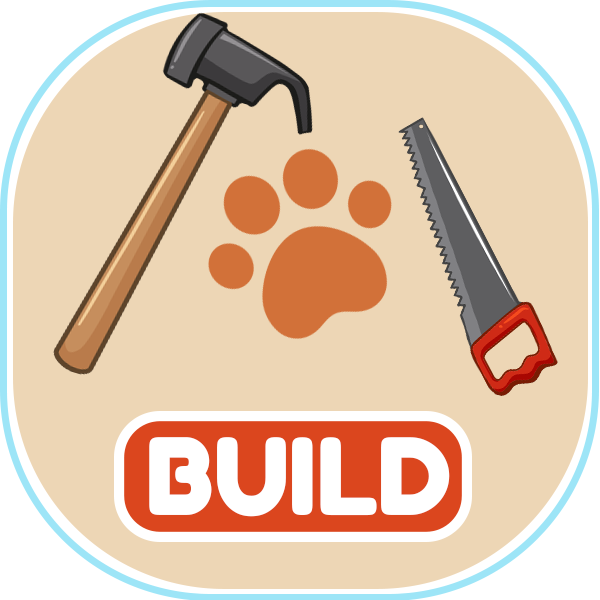
<style>
.page{position:relative;width:600px;height:600px;background:#edd6b5}
.page>*{position:absolute;margin:0}
.t1{font:111px "Fredoka-Bold";color:#ffffff}
</style>
<div class="page">
<p class="t1" style="left:149px;top:437px;width:301px;height:80px">BUILD</p>
</div>
